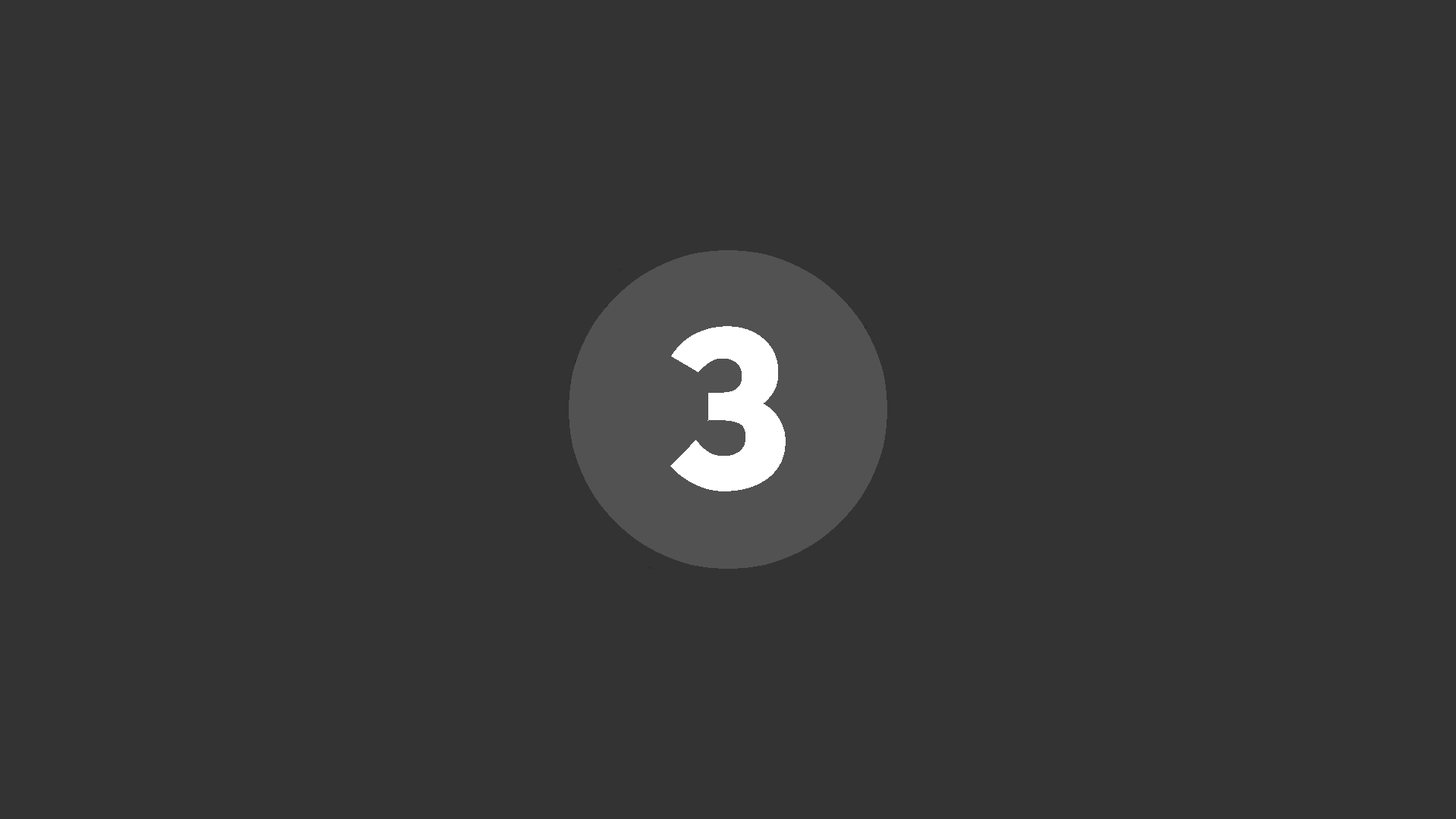
<style>
.page{position:relative;width:1456px;height:819px;background:#333333}
.page>*{position:absolute;margin:0}
.t1{font:227.5px "TypoGraphica";color:#ffffff}
</style>
<div class="page">
<p class="t1" style="left:670px;top:326px;width:116px;height:165px">3</p>
</div>
